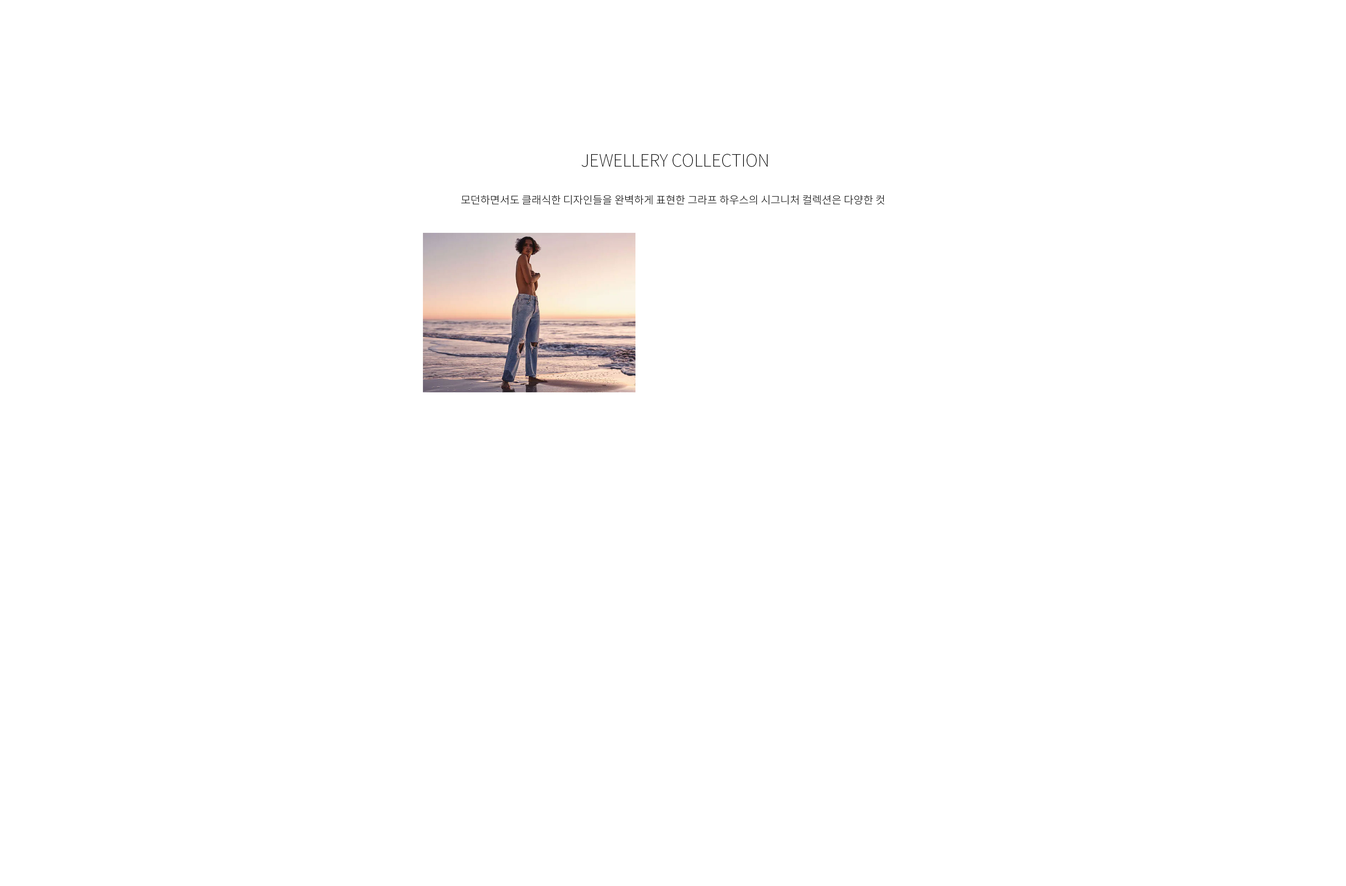
<style>
.page{position:relative;width:1346px;height:886px;background:#ffffff}
.page>*{position:absolute;margin:0}
.t1{font:17px "NotoSansKR-Thin";color:#060606}
.t2{font:10.6px "NotoSansKR-Light";color:#060606}
</style>
<div class="page">
<p class="t1" style="left:582px;top:154px;width:186px;height:13px">JEWELLERY COLLECTION</p>
<p class="t2" style="left:461px;top:195px;width:424px;height:10px">모던하면서도 클래식한 디자인들을 완벽하게 표현한 그라프 하우스의 시그니처 컬렉션은 다양한 컷</p>
</div>
